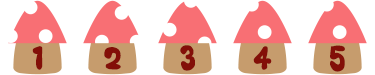
<style>
.page{position:relative;width:375px;height:75px;background:#ffffff}
.page>*{position:absolute;margin:0}
.t1{font:29.5px "Mikiyu-Font-Mokomor-kuro";letter-spacing:-0.075em;color:#830f08;text-transform:uppercase}
</style>
<div class="page">
<p class="t1" style="left:32px;top:46px;width:11px;height:24px">1</p>
<p class="t1" style="left:104px;top:47px;width:17px;height:23px">2</p>
<p class="t1" style="left:180px;top:45px;width:15px;height:26px">3</p>
<p class="t1" style="left:253px;top:46px;width:19px;height:24px">4</p>
<p class="t1" style="left:330px;top:45px;width:15px;height:27px">5</p>
</div>
